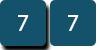
<style>
.page{position:relative;width:100px;height:50px;background:#14526b}
.page>*{position:absolute;margin:0}
.t1{font:24px "MyriadHebrew-Regular";color:#ffffff}
</style>
<div class="page">
<p class="t1" style="left:18px;top:15px;width:11px;height:16px">7</p>
<p class="t1" style="left:68px;top:15px;width:11px;height:16px">7</p>
</div>
